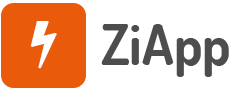
<style>
.page{position:relative;width:230px;height:90px;background:#ffffff}
.page>*{position:absolute;margin:0}
.t1{font:55px "Dosis-Bold";color:#4d4d4d}
</style>
<div class="page">
<p class="t1" style="left:101px;top:24px;width:128px;height:53px">ZiApp</p>
</div>
